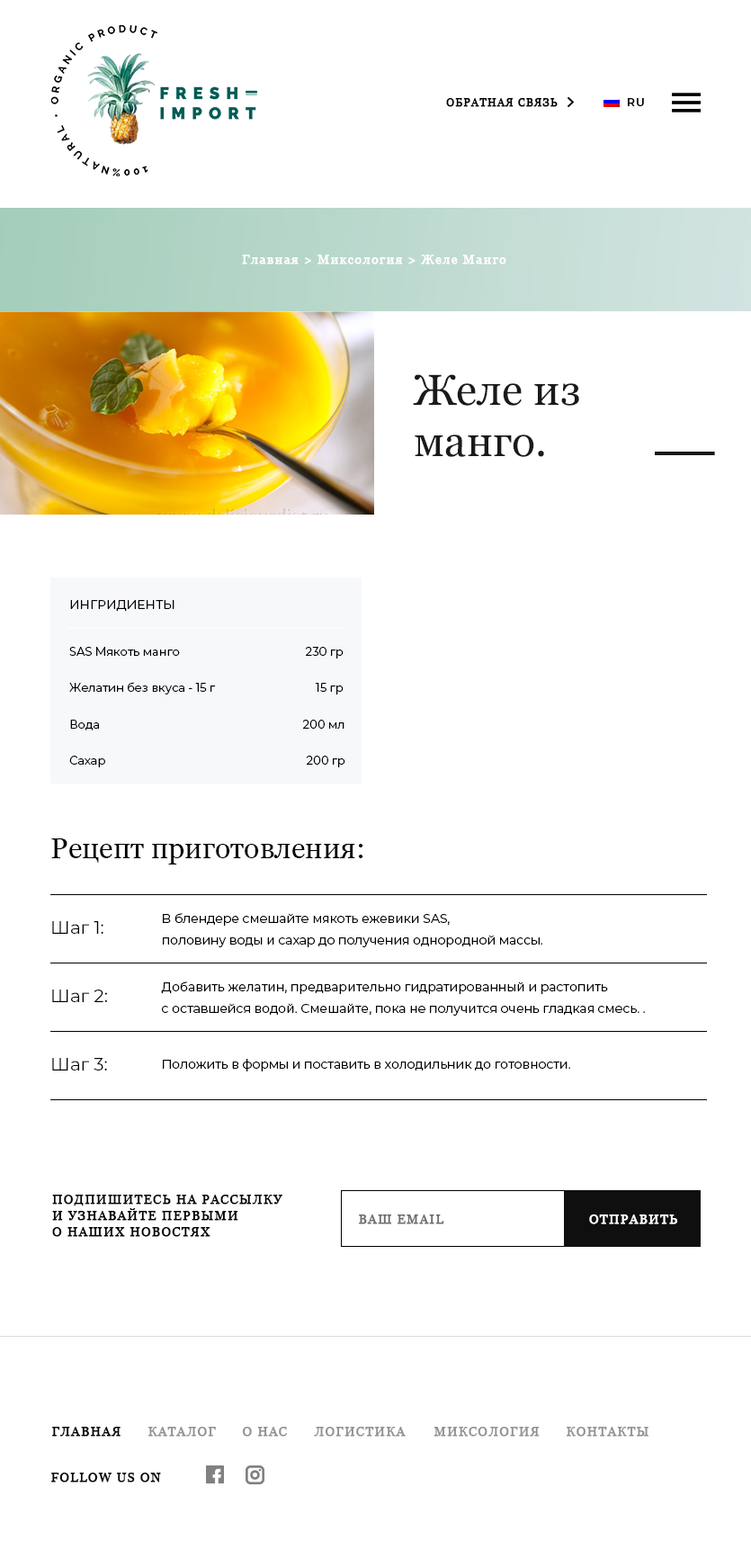
<style>
.page{position:relative;width:751px;height:1568px;background:#ffffff}
.page>*{position:absolute;margin:0}
.t1{font:10.8px "Georgia";letter-spacing:0.075em;color:#000000;text-transform:uppercase;font-weight:bold}
.t2{font:10.8px "Montserrat-Medium";letter-spacing:0.075em;color:#000000;text-transform:uppercase;font-weight:bold}
.t3{font:12.6px "Georgia";letter-spacing:0.075em;color:#ffffff;font-weight:bold}
.t4{font:43.2px "Georgia";color:#1a1a1d}
.t5{font:12.6px "Montserrat-Regular";color:#000000;text-transform:uppercase}
.t6{font:11.7px "Montserrat-Regular";color:#000000}
.t7{font:11.7px "Montserrat-Regular";color:#010101}
.t8{font:28.8px "Georgia";color:#000000}
.t9{font:12.6px/21.6px "Montserrat-Regular";color:#000000}
.t10{font:18px "Montserrat-Regular";color:#000000}
.t11{font:12.6px "Montserrat-Regular";color:#000000}
.t12{font:12.6px/16.2px "Georgia";letter-spacing:0.075em;color:#000000;text-transform:uppercase;font-weight:bold}
.t13{font:12.6px "Georgia";letter-spacing:0.075em;color:#6e6e6e;text-transform:uppercase;font-weight:bold}
.t14{font:12.6px "Georgia";letter-spacing:0.075em;color:#ffffff;text-transform:uppercase;font-weight:bold}
.t15{font:12.6px "Georgia";letter-spacing:0.075em;color:#000000;text-transform:uppercase;font-weight:bold}
.t16{font:12.6px "Georgia";letter-spacing:0.075em;color:#929292;text-transform:uppercase;font-weight:bold}
</style>
<div class="page">
<p class="t1" style="left:446px;top:98px;width:112px;height:9px">обратная связь</p>
<p class="t2" style="left:628px;top:98px;width:16px;height:9px">Ru</p>
<p class="t3" style="left:242px;top:255px;width:264px;height:9px">Главная &gt; Миксология &gt; Желе Манго</p>
<p class="t4" style="left:413px;top:374px;width:166px;height:83px">Желе из<br>манго.</p>
<p class="t5" style="left:70px;top:600px;width:105px;height:12px">Ингридиенты</p>
<p class="t6" style="left:69px;top:647px;width:111px;height:9px">SAS Мякоть манго</p>
<p class="t7" style="left:305px;top:647px;width:39px;height:12px">230 гр</p>
<p class="t6" style="left:69px;top:682px;width:147px;height:12px">Желатин без вкуса - 15 г</p>
<p class="t6" style="left:315px;top:683px;width:29px;height:11px">15 гр</p>
<p class="t6" style="left:70px;top:720px;width:29px;height:10px">Вода</p>
<p class="t6" style="left:302px;top:720px;width:43px;height:9px">200 мл</p>
<p class="t6" style="left:69px;top:756px;width:36px;height:11px">Сахар</p>
<p class="t6" style="left:306px;top:756px;width:39px;height:11px">200 гр</p>
<p class="t8" style="left:51px;top:838px;width:312px;height:27px">Рецепт приготовления:</p>
<p class="t9" style="left:163px;top:913px;width:379px;height:34px">В блендере смешайте мякоть ежевики SAS, <br>половину воды и сахар до получения однородной массы.</p>
<p class="t10" style="left:52px;top:921px;width:51px;height:13px">Шаг 1:</p>
<p class="t10" style="left:52px;top:990px;width:55px;height:12px">Шаг 2:</p>
<p class="t9" style="left:161px;top:981px;width:484px;height:35px">Добавить желатин, предварительно гидратированный и растопить <br>с оставшейся водой. Смешайте, пока не получится очень гладкая смесь. .</p>
<p class="t10" style="left:52px;top:1058px;width:55px;height:13px">Шаг 3:</p>
<p class="t11" style="left:163px;top:1059px;width:407px;height:12px">Положить в формы и поставить в холодильник до готовности.</p>
<p class="t12" style="left:52px;top:1195px;width:230px;height:42px">ПОДПИШИТЕСЬ НА РАССЫЛКУ <br>И УЗНАВАЙТЕ ПЕРВЫМИ <br>О НАШИХ НОВОСТЯХ</p>
<p class="t13" style="left:359px;top:1214px;width:85px;height:10px">ВАШ email</p>
<p class="t14" style="left:589px;top:1214px;width:89px;height:10px">ОТПРАВИТЬ</p>
<p class="t15" style="left:52px;top:1427px;width:69px;height:10px">гЛАВНАЯ</p>
<p class="t16" style="left:148px;top:1427px;width:68px;height:10px">КАТАЛОГ</p>
<p class="t16" style="left:242px;top:1427px;width:46px;height:10px">О НАС</p>
<p class="t16" style="left:314px;top:1427px;width:92px;height:10px">логистика</p>
<p class="t16" style="left:434px;top:1427px;width:106px;height:10px">миксология</p>
<p class="t16" style="left:567px;top:1427px;width:82px;height:10px">контакты</p>
<p class="t15" style="left:51px;top:1473px;width:110px;height:10px">follow us on</p>
</div>
